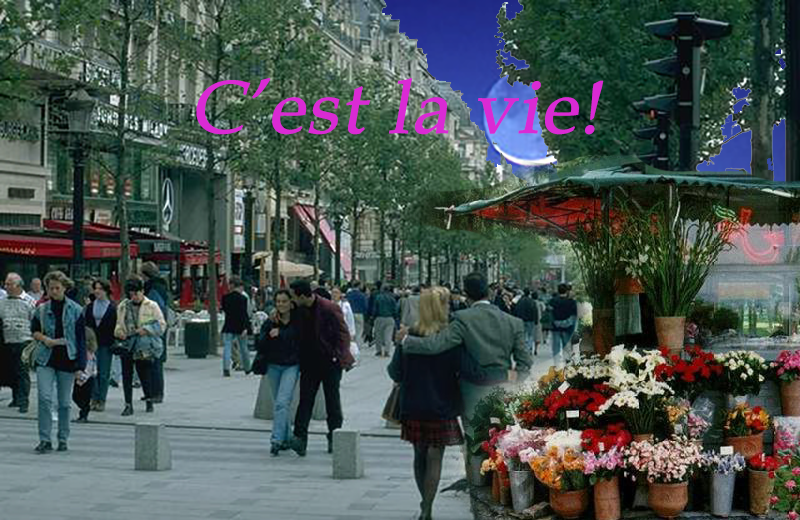
<style>
.page{position:relative;width:800px;height:520px}
.page>*{position:absolute;margin:0}
.t1{font:75px "BookAntiqua";color:#da2ad4;font-weight:bold;font-style:italic}
</style>
<div class="page">
<p class="t1" style="left:196px;top:78px;width:408px;height:57px">C’est la vie!</p>
</div>
